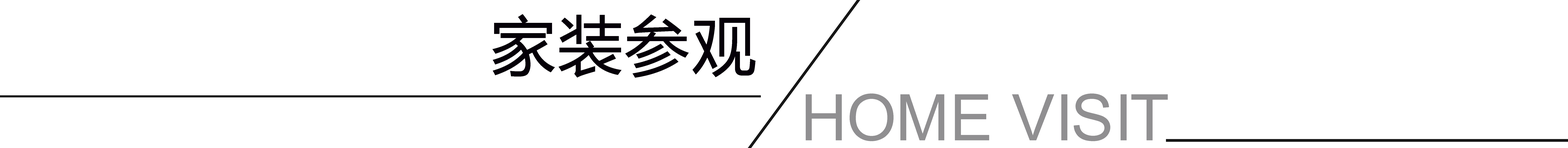
<style>
.page{position:relative;width:1568px;height:148px;background:#ffffff}
.page>*{position:absolute;margin:0}
.t1{font:64.4px "MicrosoftYaHei";color:#050008;text-transform:uppercase;font-weight:bold}
.t2{font:64.4px "ArialMT";color:#908f91;text-transform:uppercase}
.t3{font:64.4px "ArialMT";color:#08a200}
</style>
<div class="page">
<p class="t1" style="left:492px;top:14px;width:263px;height:64px">家装参观</p>
<p class="t2" style="left:806px;top:94px;width:362px;height:47px"><span class="t3"><br></span>Home Visit</p>
</div>
